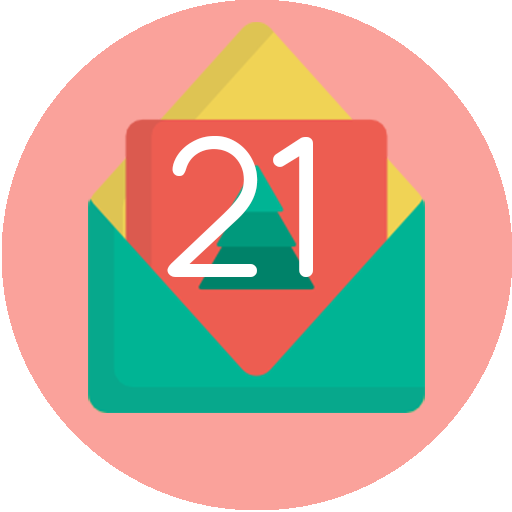
<style>
.page{position:relative;width:512px;height:512px;background:#faa29b}
.page>*{position:absolute;margin:0}
.t1{font:220.4px "Antipasto";color:#ffffff}
</style>
<div class="page">
<p class="t1" style="left:167px;top:136px;width:146px;height:141px">21</p>
</div>
